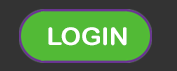
<style>
.page{position:relative;width:177px;height:71px;background:#333333}
.page>*{position:absolute;margin:0}
.t1{font:24.3px "ArialRoundedMTBold";color:#ffffff;scale:1.06 1}
</style>
<div class="page">
<p class="t1" style="left:48px;top:27px;width:79px;height:19px">LOGIN</p>
</div>
